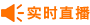
<style>
.page{position:relative;width:90px;height:25px;background:#ffffff}
.page>*{position:absolute;margin:0}
.t1{font:14.7px "FZYDZHJW--GB1-0";letter-spacing:0.1em;color:#ff7200}
</style>
<div class="page">
<p class="t1" style="left:27px;top:6px;width:63px;height:14px">实时直播</p>
</div>
